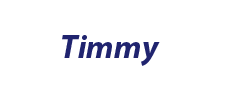
<style>
.page{position:relative;width:225px;height:91px;background:#ffffff}
.page>*{position:absolute;margin:0}
.t1{font:33.3px "MyriadPro-BoldIt";color:#20246f}
</style>
<div class="page">
<p class="t1" style="left:62px;top:35px;width:98px;height:31px">Timmy</p>
</div>
